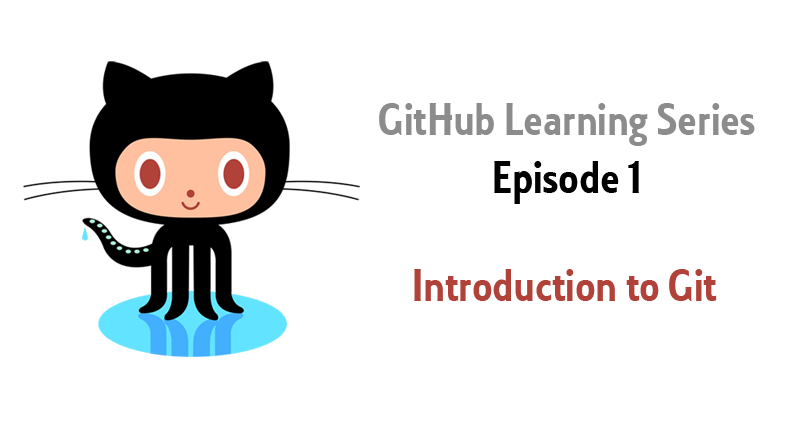
<style>
.page{position:relative;width:790px;height:430px;background:#ffffff}
.page>*{position:absolute;margin:0}
.t1{font:48px "Collegiate";color:#8c8c8c}
.t2{font:48px "Collegiate";color:#000000}
.t3{font:48px "Collegiate";color:#b1423a}
</style>
<div class="page">
<p class="t1" style="left:379px;top:103px;width:376px;height:101px;text-align:center">GitHub Learning Series<br><span class="t2">Episode 1</span></p>
<p class="t3" style="left:414px;top:269px;width:303px;height:32px">Introduction to Git</p>
</div>
